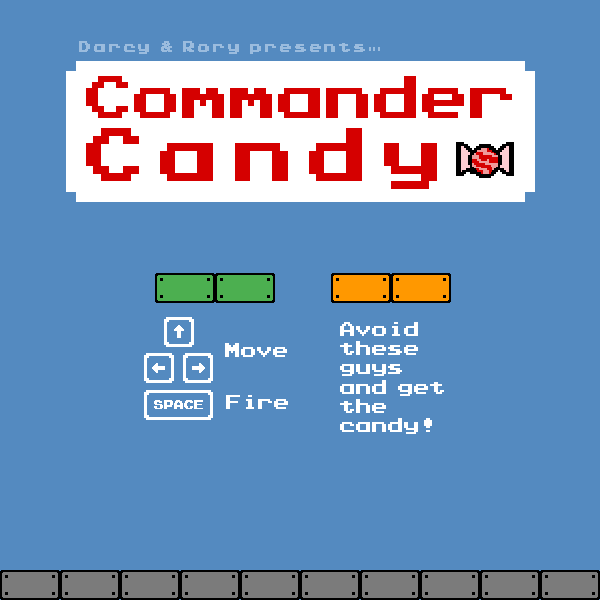
<style>
.page{position:relative;width:600px;height:600px;background:#548ac0}
.page>*{position:absolute;margin:0}
.t1{font:12px "PressStartK";letter-spacing:0.24em;color:#9bbcde}
.t2{font:60px "PressStartK";letter-spacing:0.24em;color:#d50000}
.t3{font:16px "PressStartK";letter-spacing:-0.001em;color:#ffffff}
</style>
<div class="page">
<p class="t1" style="left:79px;top:41px;width:301px;height:13px">Darcy &amp; Rory presents...</p>
<p class="t2" style="left:86px;top:128px;width:351px;height:61px">Candy</p>
<p class="t3" style="left:340px;top:322px;width:104px;height:112px">Avoid<br>these<br>guys<br>and get<br>the <br>candy!</p>
<p class="t3" style="left:225px;top:343px;width:62px;height:14px">Move</p>
<p class="t3" style="left:226px;top:395px;width:62px;height:14px">Fire</p>
</div>
